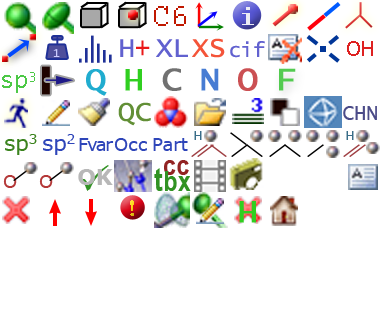
<style>
.page{position:relative;width:380px;height:320px;background:#ffffff}
.page>*{position:absolute;margin:0}
.t1{font:32px "Courier";color:#c01800}
.t2{font:28px "Modern-Regular";letter-spacing:0.06em;color:#ebebf4;scale:1.36 1}
.t3{font:28px "LucidaConsole";color:#6161cf}
.t4{font:28px "LucidaConsole";letter-spacing:-0.005em;color:#ea1818;scale:0.9 1}
.t5{font:28px "LucidaConsole";color:#f45439}
.t6{font:20px "LucidaConsole";color:#6161cf}
.t7{font:24px "LucidaConsole";letter-spacing:-0.005em;color:#de2121}
.t8{font:12px "LucidaConsole";letter-spacing:-0.005em;color:#ccccff;scale:0.9 1}
.t9{font:24px "LucidaConsole";letter-spacing:-0.005em;color:#4cc846}
.t10{font:34px "LucidaConsole";letter-spacing:-0.025em;color:#20accf;font-weight:bold}
.t11{font:34px "LucidaConsole";letter-spacing:-0.025em;color:#30cf20;font-weight:bold}
.t12{font:34px "LucidaConsole";letter-spacing:-0.025em;color:#717171;font-weight:bold}
.t13{font:34px "LucidaConsole";letter-spacing:-0.025em;color:#477cd3;font-weight:bold}
.t14{font:34px "LucidaConsole";letter-spacing:-0.025em;color:#cb5053;font-weight:bold}
.t15{font:34px "LucidaConsole";letter-spacing:-0.025em;color:#53cb50;font-weight:bold}
.t16{font:28px "LucidaConsole";color:#628f36}
.t17{font:22.3px "LucidaConsole";letter-spacing:-0.005em;color:#4b4b88;scale:0.9 1}
.t18{font:21.5px "Verdana";color:#3b831e}
.t19{font:21.5px "Verdana";letter-spacing:-0.01em;color:#3b831e}
.t20{font:24.8px "Verdana";letter-spacing:-0.01em;color:#3b831e}
.t21{font:21.5px "Verdana";color:#2e45b9}
.t22{font:21.5px "Verdana";letter-spacing:-0.01em;color:#2e45b9}
.t23{font:24.8px "Verdana";letter-spacing:-0.01em;color:#2e45b9}
.t24{font:12px "Verdana";letter-spacing:0.01em;color:#396d88}
.t25{font:18px "Verdana";letter-spacing:-0.08em;color:#2e45b9}
.t26{font:18px "Verdana";letter-spacing:0.01em;color:#2e45b9}
.t27{font:18px "Verdana";letter-spacing:-0.01em;color:#2e45b9}
.t28{font:28px/16px "ArialNarrow-Bold";letter-spacing:0.025em;color:#922323}
.t29{font:32px/16px "ArialNarrow-Bold";letter-spacing:0.025em;color:#319223}
.t30{font:28px/16px "ArialNarrow-Bold";letter-spacing:0.025em;color:#319223}
.t31{font:22px "Verdana-Bold";letter-spacing:-0.013em;color:#b8b8b8}
.t32{font:18px "Verdana";letter-spacing:-0.005em;color:#b43838}
.t33{font:19.8px "Asimov";letter-spacing:0.05em;scale:1.17 1}
</style>
<div class="page">
<p class="t1" style="left:154px;top:6px;width:32px;height:20px">C6</p>
<p class="t2" style="left:242px;top:7px;width:12px;height:18px">i</p>
<p class="t3" style="left:120px;top:39px;width:14px;height:18px">H</p>
<p class="t4" style="left:136px;top:40px;width:14px;height:16px">+</p>
<p class="t3" style="left:156px;top:39px;width:32px;height:18px">XL</p>
<p class="t5" style="left:192px;top:38px;width:33px;height:20px">XS</p>
<p class="t6" style="left:230px;top:41px;width:35px;height:17px">cif</p>
<p class="t7" style="left:347px;top:41px;width:26px;height:15px">OH</p>
<p class="t8" style="left:53px;top:49px;width:7px;height:8px">1</p>
<p class="t9" style="left:2px;top:72px;width:33px;height:21px">sp3</p>
<p class="t10" style="left:86px;top:69px;width:21px;height:27px">Q</p>
<p class="t11" style="left:125px;top:69px;width:17px;height:22px">H</p>
<p class="t12" style="left:162px;top:68px;width:20px;height:23px">C</p>
<p class="t13" style="left:201px;top:68px;width:18px;height:23px">N</p>
<p class="t14" style="left:238px;top:68px;width:20px;height:23px">O</p>
<p class="t15" style="left:279px;top:68px;width:17px;height:23px">F</p>
<p class="t16" style="left:118px;top:102px;width:33px;height:24px">QC</p>
<p class="t17" style="left:343px;top:106px;width:34px;height:14px">CHN</p>
<p class="t18" style="left:5px;top:134px;width:32px;height:21px">s<span class="t19">p</span><span class="t20">3</span></p>
<p class="t21" style="left:43px;top:134px;width:32px;height:21px">s<span class="t22">p</span><span class="t23">2</span></p>
<p class="t24" style="left:194px;top:131px;width:8px;height:9px">H</p>
<p class="t24" style="left:346px;top:131px;width:8px;height:9px">H</p>
<p class="t25" style="left:79px;top:138px;width:35px;height:13px">Fvar</p>
<p class="t26" style="left:114px;top:138px;width:33px;height:13px">Occ</p>
<p class="t27" style="left:153px;top:138px;width:35px;height:13px"><span class="t26">P</span>ar<span class="t26">t</span></p>
<p class="t28" style="left:154px;top:160px;width:37px;height:31px;text-align:center">cc<br><span class="t29">t</span><span class="t30">bx</span></p>
<p class="t31" style="left:78px;top:169px;width:35px;height:16px">OK</p>
<p class="t32" style="left:3px;top:175px;width:14px;height:13px">O</p>
<p class="t32" style="left:39px;top:175px;width:14px;height:13px">O</p>
<p class="t33" style="left:130px;top:200px;width:4px;height:16px">!</p>
<p class="t11" style="left:239px;top:201px;width:17px;height:22px">H</p>
</div>
